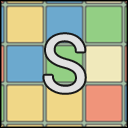
<style>
.page{position:relative;width:128px;height:128px}
.page>*{position:absolute;margin:0}
.t1{font:80px "Roboto-Regular";color:#e1e1e1}
</style>
<div class="page">
<p class="t1" style="left:44px;top:34px;width:41px;height:59px">S</p>
</div>
